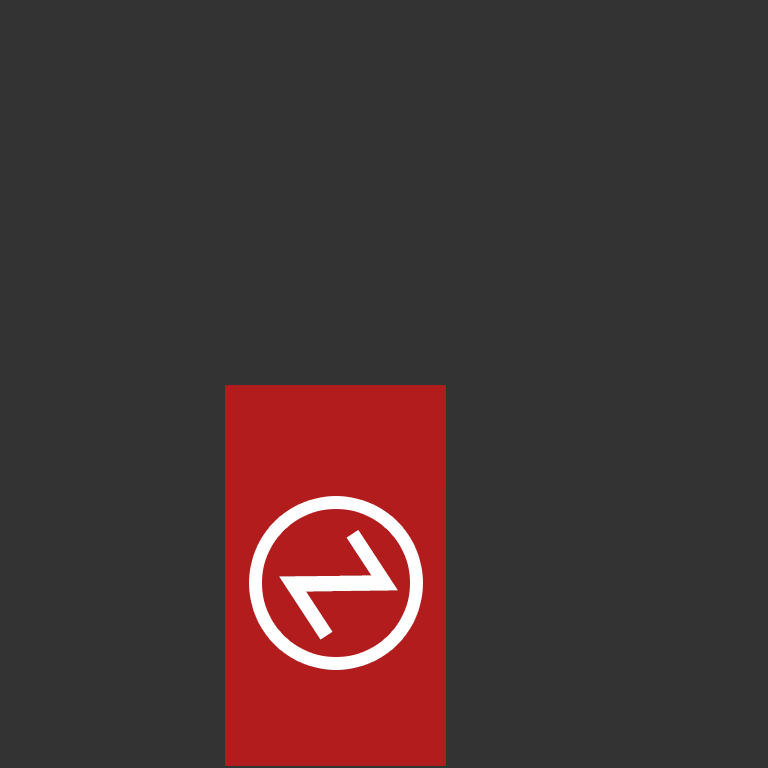
<style>
.page{position:relative;width:768px;height:768px;background:#333333}
.page>*{position:absolute;margin:0}
.t1{font:130.4px "FONTSPRINGDEMO-CosmataSemiBoldRegular";color:#fefefe}
</style>
<div class="page">
<p class="t1" style="left:279px;top:530px;width:119px;height:110px;rotate:57deg">Z</p>
</div>
